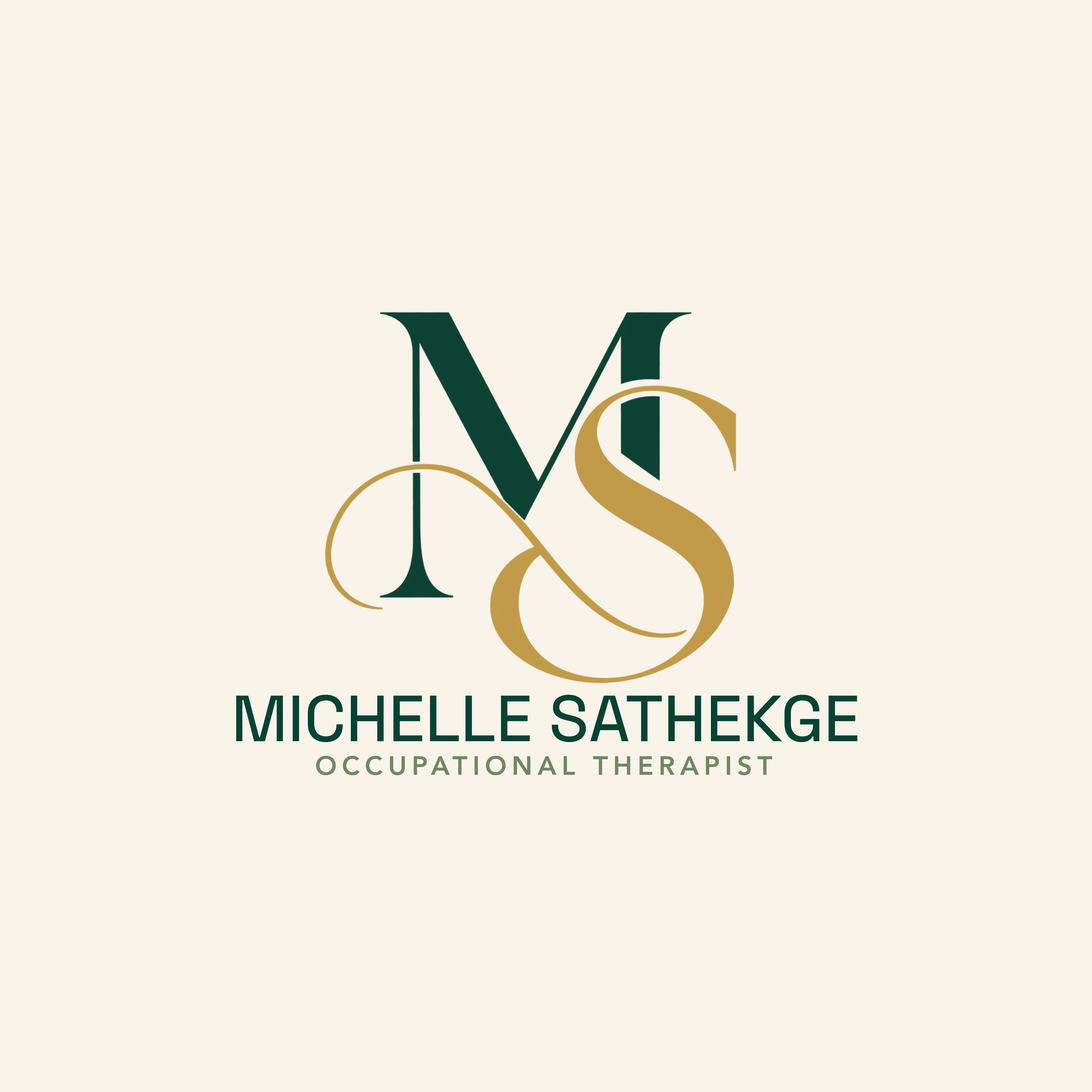
<style>
.page{position:relative;width:1092px;height:1092px;background:#f9f3e9}
.page>*{position:absolute;margin:0}
.t1{font:65.1px "SpaceGrotesk-Medium";color:#064334}
</style>
<div class="page">
<p class="t1" style="left:0px;top:0px;width:1092px;height:1092px;text-align:center">MICHELLE SATHEKGE</p>
</div>
